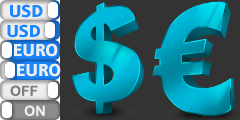
<style>
.page{position:relative;width:240px;height:120px;background:#333333}
.page>*{position:absolute;margin:0}
.t1{font:18px "TTAnversBlack";color:#1a86ff}
.t2{font:18px "TTAnversBlack";color:#eeeeee}
</style>
<div class="page">
<p class="t1" style="left:10px;top:4px;width:33px;height:14px">USD</p>
<p class="t1" style="left:7px;top:24px;width:33px;height:14px">USD</p>
<p class="t2" style="left:14px;top:43px;width:44px;height:14px">EURO</p>
<p class="t2" style="left:17px;top:63px;width:44px;height:14px">EURO</p>
</div>
